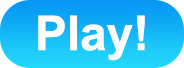
<style>
.page{position:relative;width:184px;height:68px}
.page>*{position:absolute;margin:0}
.t1{font:48px "Arial-BoldMT";color:#ffffff}
</style>
<div class="page">
<p class="t1" style="left:38px;top:15px;width:107px;height:46px">Play!</p>
</div>
